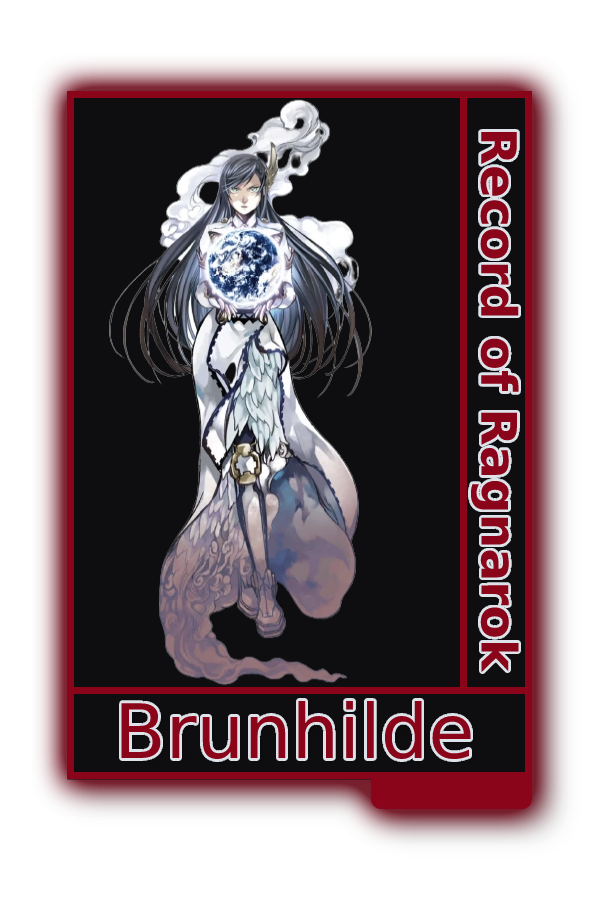
<style>
.page{position:relative;width:600px;height:900px;background:#0e0e10}
.page>*{position:absolute;margin:0}
.t1{font:48.8px "MADETOMMY-Bold";color:#8a051a}
.t2{font:75px "CoolveticaRg-Regular";color:#8a051a}
</style>
<div class="page">
<p class="t1" style="left:470px;top:131px;width:49px;height:542px;rotate:90deg">Record of Ragnarok</p>
<p class="t2" style="left:121px;top:701px;width:350px;height:59px">Brunhilde</p>
</div>
